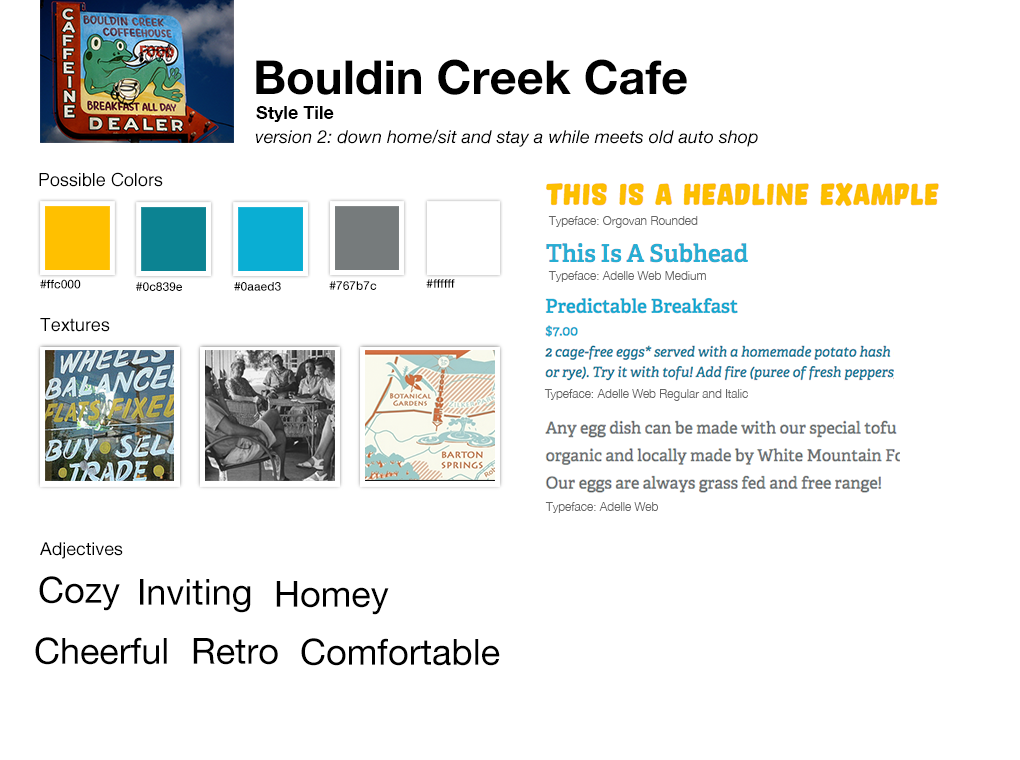
<style>
.page{position:relative;width:1020px;height:760px;background:#ffffff}
.page>*{position:absolute;margin:0}
.t1{font:47px "HelveticaNeue-Bold";color:#000000}
.t2{font:18px "HelveticaNeue-Bold";color:#000000}
.t3{font:18px "HelveticaNeue-Italic";color:#000000}
.t4{font:18px "Helvetica";color:#000000}
.t5{font:12px "HelveticaNeue-Light";color:#666666}
.t6{font:12px "HelveticaNeue-Medium";color:#000000}
.t7{font:18px "HelveticaNeue";color:#000000}
.t8{font:36px "HelveticaNeue";color:#000000}
</style>
<div class="page">
<p class="t1" style="left:256px;top:59px;width:431px;height:36px">Bouldin Creek Cafe</p>
<p class="t2" style="left:256px;top:106px;width:78px;height:16px">Style Tile</p>
<p class="t3" style="left:255px;top:129px;width:503px;height:18px">version 2: down home/sit and stay a while meets old auto shop</p>
<p class="t4" style="left:39px;top:172px;width:124px;height:15px">Possible Colors</p>
<p class="t5" style="left:548px;top:216px;width:150px;height:12px">Typeface: Orgovan Rounded</p>
<p class="t6" style="left:40px;top:279px;width:41px;height:10px">#ffc000</p>
<p class="t6" style="left:329px;top:281px;width:48px;height:9px">#767b7c</p>
<p class="t6" style="left:426px;top:279px;width:29px;height:9px">#ffffff</p>
<p class="t5" style="left:548px;top:271px;width:158px;height:11px">Typeface: Adelle Web Medium</p>
<p class="t6" style="left:136px;top:282px;width:46px;height:9px">#0c839e</p>
<p class="t6" style="left:234px;top:282px;width:47px;height:9px">#0aaed3</p>
<p class="t4" style="left:40px;top:318px;width:70px;height:14px">Textures</p>
<p class="t5" style="left:544px;top:389px;width:204px;height:12px">Typeface: Adelle Web Regular and Italic</p>
<p class="t5" style="left:545px;top:502px;width:113px;height:11px">Typeface: Adelle Web</p>
<p class="t7" style="left:40px;top:542px;width:83px;height:17px">Adjectives</p>
<p class="t8" style="left:39px;top:576px;width:81px;height:35px">Cozy</p>
<p class="t8" style="left:140px;top:579px;width:111px;height:34px">Inviting</p>
<p class="t8" style="left:276px;top:581px;width:113px;height:34px">Homey</p>
<p class="t8" style="left:35px;top:637px;width:132px;height:28px">Cheerful</p>
<p class="t8" style="left:193px;top:638px;width:85px;height:27px">Retro</p>
<p class="t8" style="left:301px;top:638px;width:199px;height:28px">Comfortable</p>
</div>
